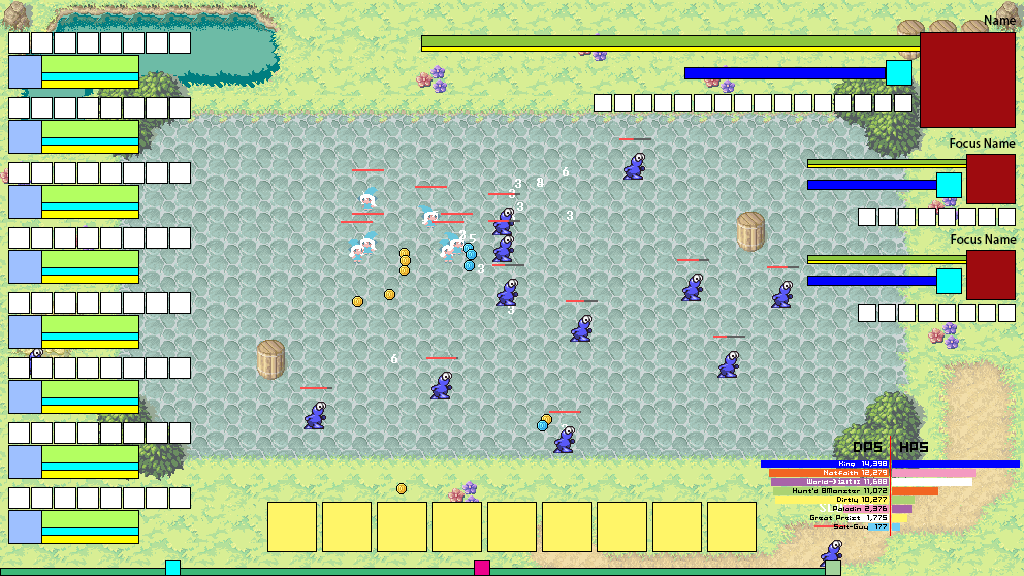
<style>
.page{position:relative;width:1024px;height:576px}
.page>*{position:absolute;margin:0}
.t1{font:12px "AdobeHeitiStd-Regular";color:#000000}
.t2{font:16px "04b03b";color:#000000}
.t3{font:8px "04b03b";color:#ffffff}
.t4{font:8px "SimSun";color:#ffffff}
.t5{font:8px "04b03b";color:#000000}
</style>
<div class="page">
<p class="t1" style="left:985px;top:15px;width:31px;height:10px">Name</p>
<p class="t1" style="left:950px;top:138px;width:66px;height:10px">Focus Name</p>
<p class="t1" style="left:951px;top:234px;width:66px;height:10px">Focus Name</p>
<p class="t2" style="left:854px;top:442px;width:28px;height:10px">DPS</p>
<p class="t2" style="left:900px;top:442px;width:28px;height:10px">HPS</p>
<p class="t3" style="left:839px;top:461px;width:48px;height:6px">King  14,398</p>
<p class="t3" style="left:824px;top:470px;width:63px;height:6px">Natfaith 12,279</p>
<p class="t4" style="left:807px;top:478px;width:80px;height:7px"><span class="t3">World</span>-Diaster<span class="t3"> 11,688</span></p>
<p class="t5" style="left:793px;top:488px;width:94px;height:6px">Hunt'd 8Monster 11,072</p>
<p class="t5" style="left:837px;top:497px;width:50px;height:6px">Dirtly 10,277</p>
<p class="t5" style="left:833px;top:506px;width:54px;height:6px">Paladin 2,376</p>
<p class="t5" style="left:810px;top:515px;width:77px;height:6px">Great Preist  1,775</p>
<p class="t5" style="left:834px;top:524px;width:53px;height:6px">Salt-Guy  177</p>
</div>
